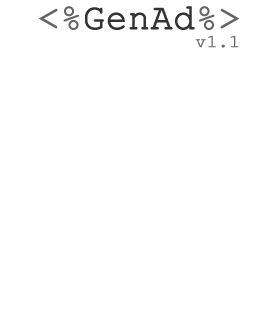
<style>
.page{position:relative;width:276px;height:328px;background:#ffffff}
.page>*{position:absolute;margin:0}
.t1{font:36px "CourierNewPSMT";color:#333333;font-weight:bold}
.t2{font:36px "CourierNewPSMT";color:#646464;font-weight:bold}
.t3{font:18px "CourierNewPSMT";color:#646464;font-weight:bold}
</style>
<div class="page">
<p class="t1" style="left:38px;top:6px;width:202px;height:24px"><span class="t2">&lt;%</span>GenAd<span class="t2">%&gt;</span></p>
<p class="t3" style="left:195px;top:35px;width:44px;height:13px">v1.1</p>
</div>
